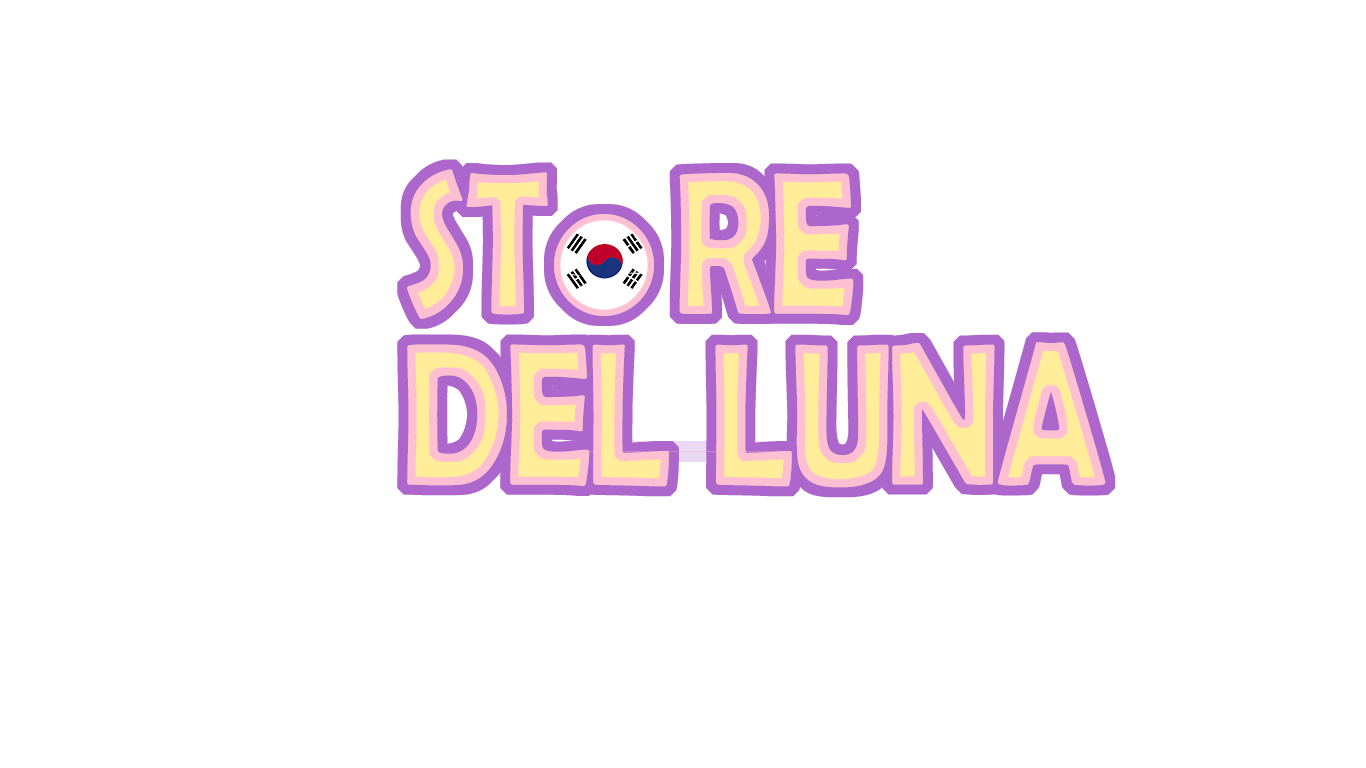
<style>
.page{position:relative;width:1366px;height:768px;background:#ffffff}
.page>*{position:absolute;margin:0}
.t1{font:204px/171px "BerlinSansFBDemi-Bold";letter-spacing:0.025em;scale:0.76 1}
</style>
<div class="page">
<p class="t1" style="left:407px;top:169px;width:699px;height:319px">ST   RE<br>DEL LUNA</p>
</div>
